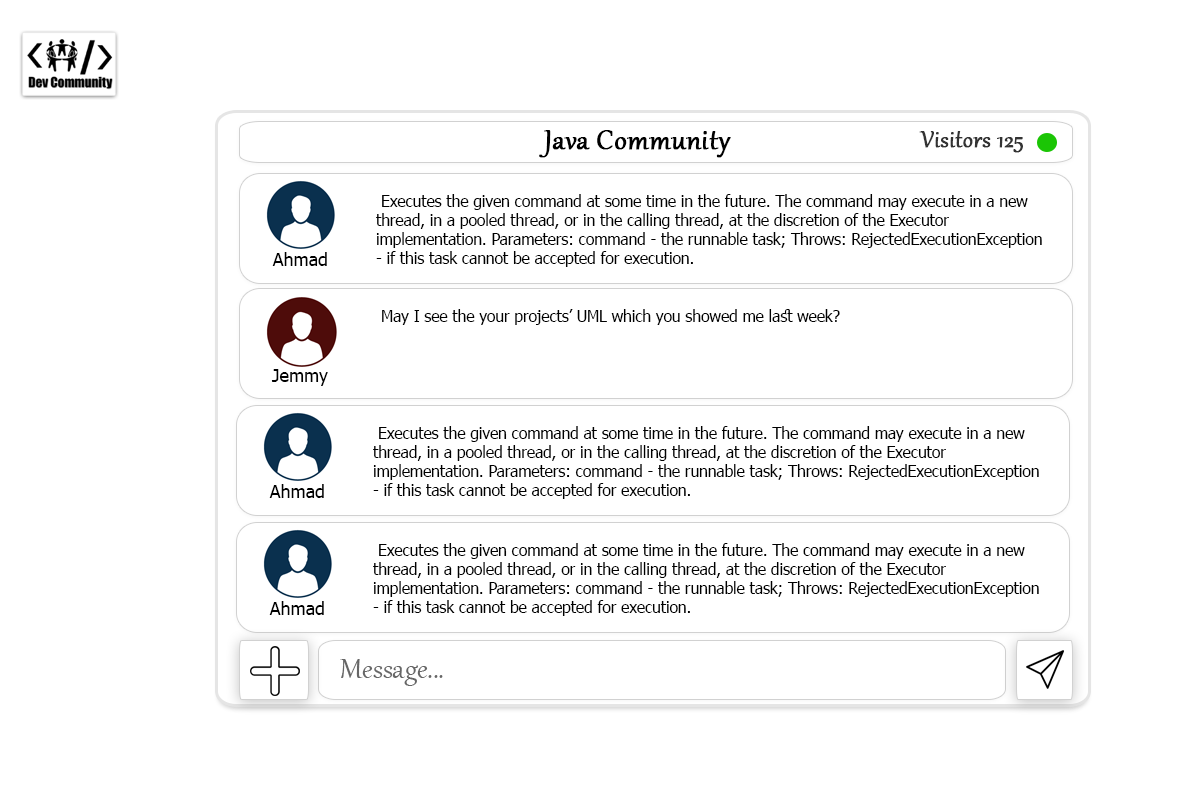
<style>
.page{position:relative;width:1200px;height:800px;background:#ffffff}
.page>*{position:absolute;margin:0}
.t1{font:34px "Gabriola";color:#000000;font-weight:bold}
.t2{font:28px "Gabriola";color:#333333;font-weight:bold}
.t3{font:15.6px "Tahoma";color:#000000}
.t4{font:18px "Tahoma";color:#000000}
.t5{font:34px "Gabriola";color:#666666}
</style>
<div class="page">
<p class="t1" style="left:539px;top:130px;width:192px;height:28px">Java Community</p>
<p class="t2" style="left:919px;top:131px;width:104px;height:22px">Visitors 125</p>
<p class="t3" style="left:376px;top:194px;width:666px;height:73px">Executes the given command at some time in the future. The command may execute in a new thread, in a pooled thread, or in the calling thread, at the discretion of the Executor implementation. Parameters: command - the runnable task; Throws: RejectedExecutionException - if this task cannot be accepted for execution.</p>
<p class="t4" style="left:272px;top:252px;width:55px;height:14px">Ahmad</p>
<p class="t3" style="left:382px;top:309px;width:458px;height:16px">May I see the your projects’ UML which you showed me last week?</p>
<p class="t4" style="left:271px;top:369px;width:57px;height:17px">Jemmy</p>
<p class="t3" style="left:373px;top:426px;width:666px;height:73px">Executes the given command at some time in the future. The command may execute in a new thread, in a pooled thread, or in the calling thread, at the discretion of the Executor implementation. Parameters: command - the runnable task; Throws: RejectedExecutionException - if this task cannot be accepted for execution.</p>
<p class="t4" style="left:269px;top:484px;width:55px;height:14px">Ahmad</p>
<p class="t3" style="left:373px;top:543px;width:666px;height:73px">Executes the given command at some time in the future. The command may execute in a new thread, in a pooled thread, or in the calling thread, at the discretion of the Executor implementation. Parameters: command - the runnable task; Throws: RejectedExecutionException - if this task cannot be accepted for execution.</p>
<p class="t4" style="left:269px;top:601px;width:55px;height:14px">Ahmad</p>
<p class="t5" style="left:340px;top:659px;width:103px;height:27px">...Message</p>
</div>
